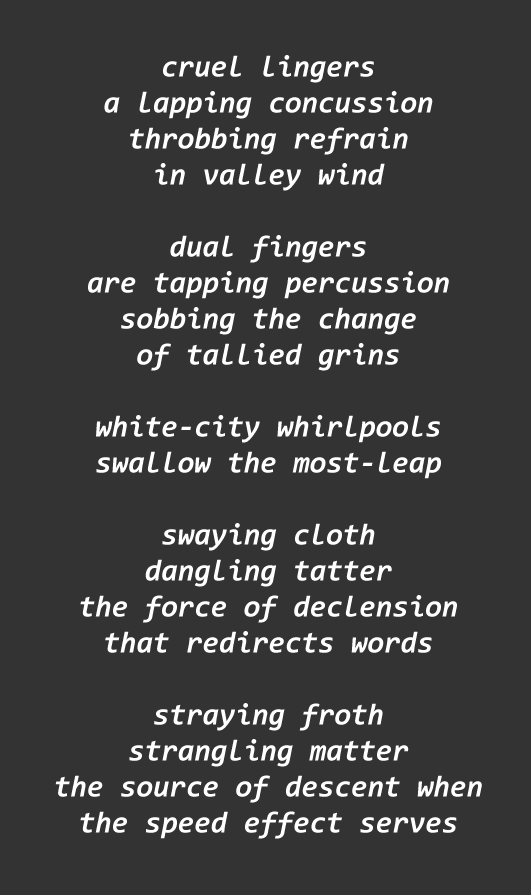
<style>
.page{position:relative;width:531px;height:895px;background:#333333}
.page>*{position:absolute;margin:0}
.t1{font:30px "Consolas-BoldItalic";color:#ffffff}
</style>
<div class="page">
<p class="t1" style="left:55px;top:55px;width:427px;height:784px;text-align:center">cruel lingers<br>a lapping concussion<br>throbbing refrain<br>in valley wind<br><br>dual fingers<br>are tapping percussion<br>sobbing the change<br>of tallied grins<br><br>white-city whirlpools<br>swallow the most-leap<br><br>swaying cloth<br>dangling tatter<br>the force of declension<br>that redirects words<br><br>straying froth<br>strangling matter<br>the source of descent when<br>the speed effect serves</p>
</div>
